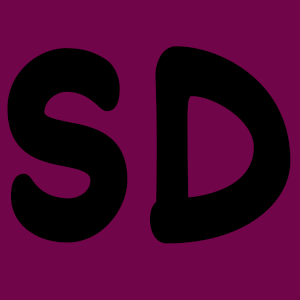
<style>
.page{position:relative;width:300px;height:300px;background:#700549}
.page>*{position:absolute;margin:0}
.t1{font:238.8px "CollectorComic-Bold";letter-spacing:0.06em;color:#000000;scale:0.78 1}
</style>
<div class="page">
<p class="t1" style="left:7px;top:46px;width:284px;height:198px">SD</p>
</div>
